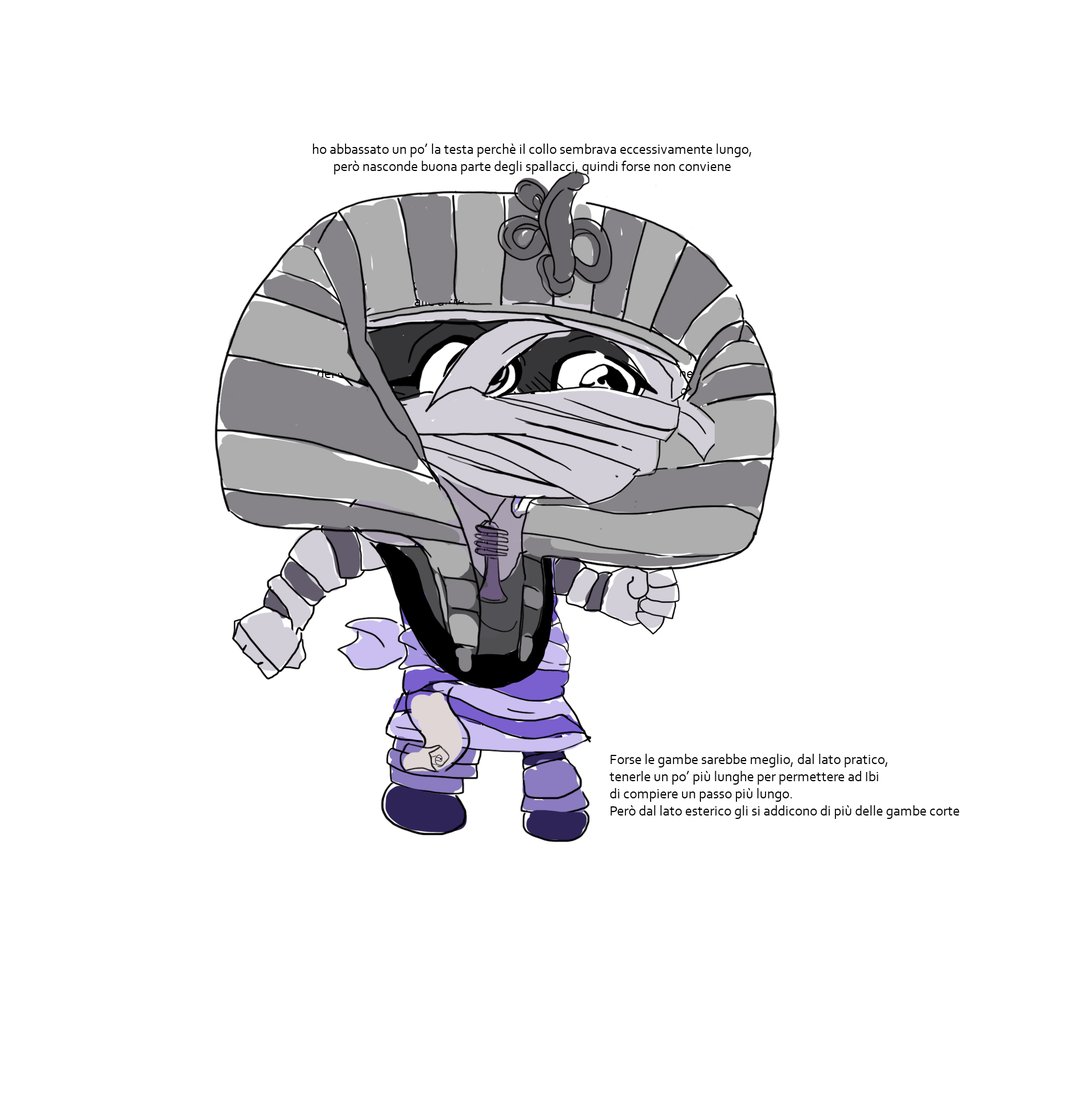
<style>
.page{position:relative;width:1090px;height:1094px;background:#ffffff}
.page>*{position:absolute;margin:0}
.t1{font:14.3px "Corbel";color:#000000}
</style>
<div class="page">
<p class="t1" style="left:313px;top:144px;width:438px;height:30px;text-align:center">ho abbassato un po’ la testa perchè il collo sembrava eccessivamente lungo,<br>però nasconde buona parte degli spallacci, quindi forse non conviene</p>
<p class="t1" style="left:609px;top:754px;width:350px;height:65px">Forse le gambe sarebbe meglio, dal lato pratico,<br>tenerle un po’ più lunghe per permettere ad Ibi <br>di compiere un passo più lungo.<br>Però dal lato esterico gli si addicono di più delle gambe corte</p>
</div>
